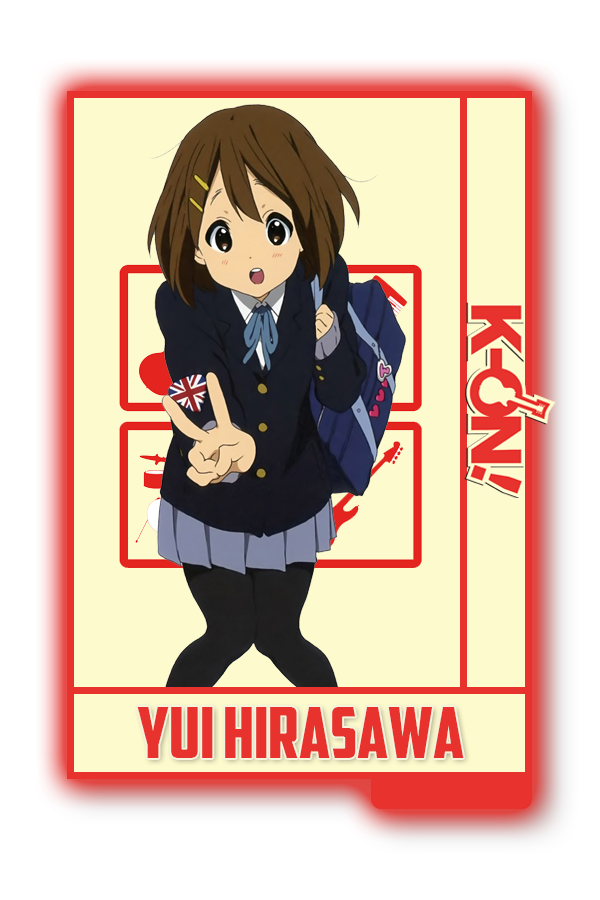
<style>
.page{position:relative;width:600px;height:900px;background:#fdfacd}
.page>*{position:absolute;margin:0}
.t1{font:70.8px "AmericanCaptain";color:#e7322e}
</style>
<div class="page">
<p class="t1" style="left:137px;top:707px;width:327px;height:51px">YUI HIRASAWA</p>
</div>
